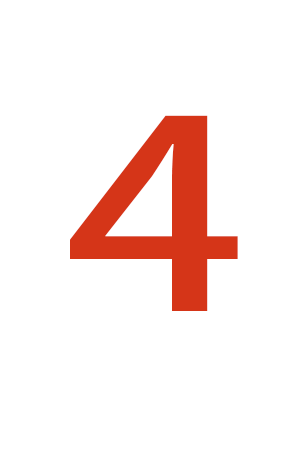
<style>
.page{position:relative;width:300px;height:450px;background:#ffffff}
.page>*{position:absolute;margin:0}
.t1{font:259.7px "AdobeFanHeitiStd-Bold";color:#d53518;scale:1.25 1}
</style>
<div class="page">
<p class="t1" style="left:70px;top:115px;width:168px;height:196px">4</p>
</div>
